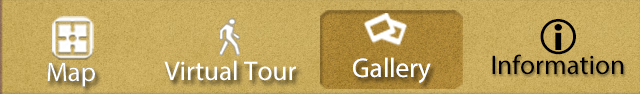
<style>
.page{position:relative;width:640px;height:94px}
.page>*{position:absolute;margin:0}
.t1{font:27.2px "MyriadPro-Regular";color:#010000}
.t2{font:27.2px "MyriadPro-Regular";color:#ffffff}
</style>
<div class="page">
<p class="t1" style="left:492px;top:54px;width:132px;height:21px">Information</p>
<p class="t2" style="left:47px;top:62px;width:48px;height:25px">Map</p>
<p class="t2" style="left:47px;top:62px;width:48px;height:25px">Map</p>
<p class="t2" style="left:164px;top:60px;width:132px;height:21px">Virtual Tour</p>
<p class="t2" style="left:353px;top:57px;width:78px;height:26px">Gallery</p>
<p class="t2" style="left:353px;top:57px;width:78px;height:26px">Gallery</p>
<p class="t2" style="left:353px;top:57px;width:78px;height:26px">Gallery</p>
</div>
